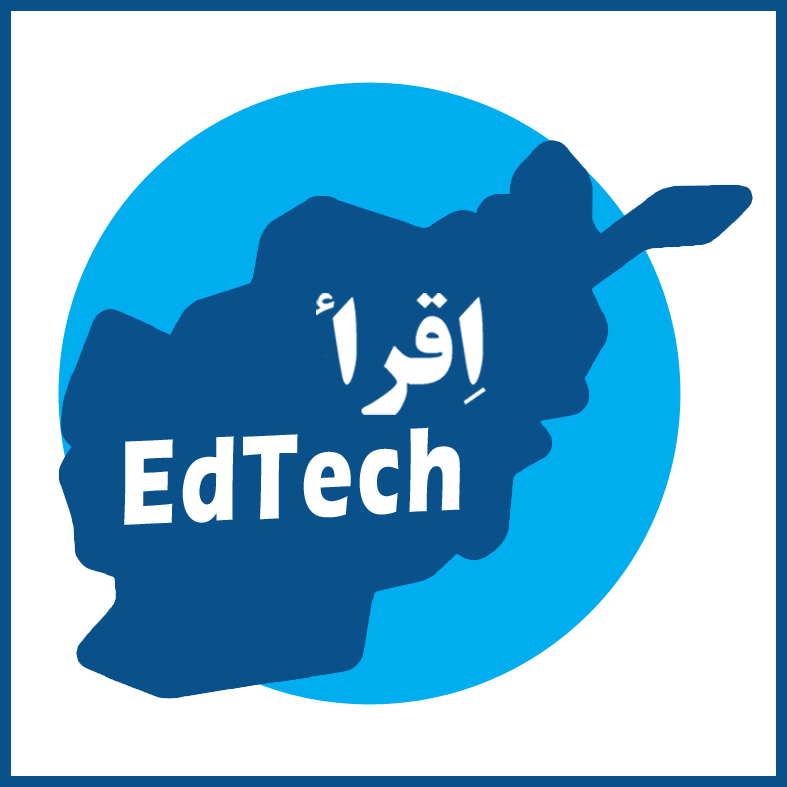
<style>
.page{position:relative;width:787px;height:787px;background:#ffffff}
.page>*{position:absolute;margin:0}
.t1{font:124.5px "ErasITC-Bold";letter-spacing:0.05em;color:#ffffff;scale:0.7 1}
</style>
<div class="page">
<p class="t1" style="left:124px;top:427px;width:336px;height:98px;rotate:-3deg">EdTech</p>
</div>
